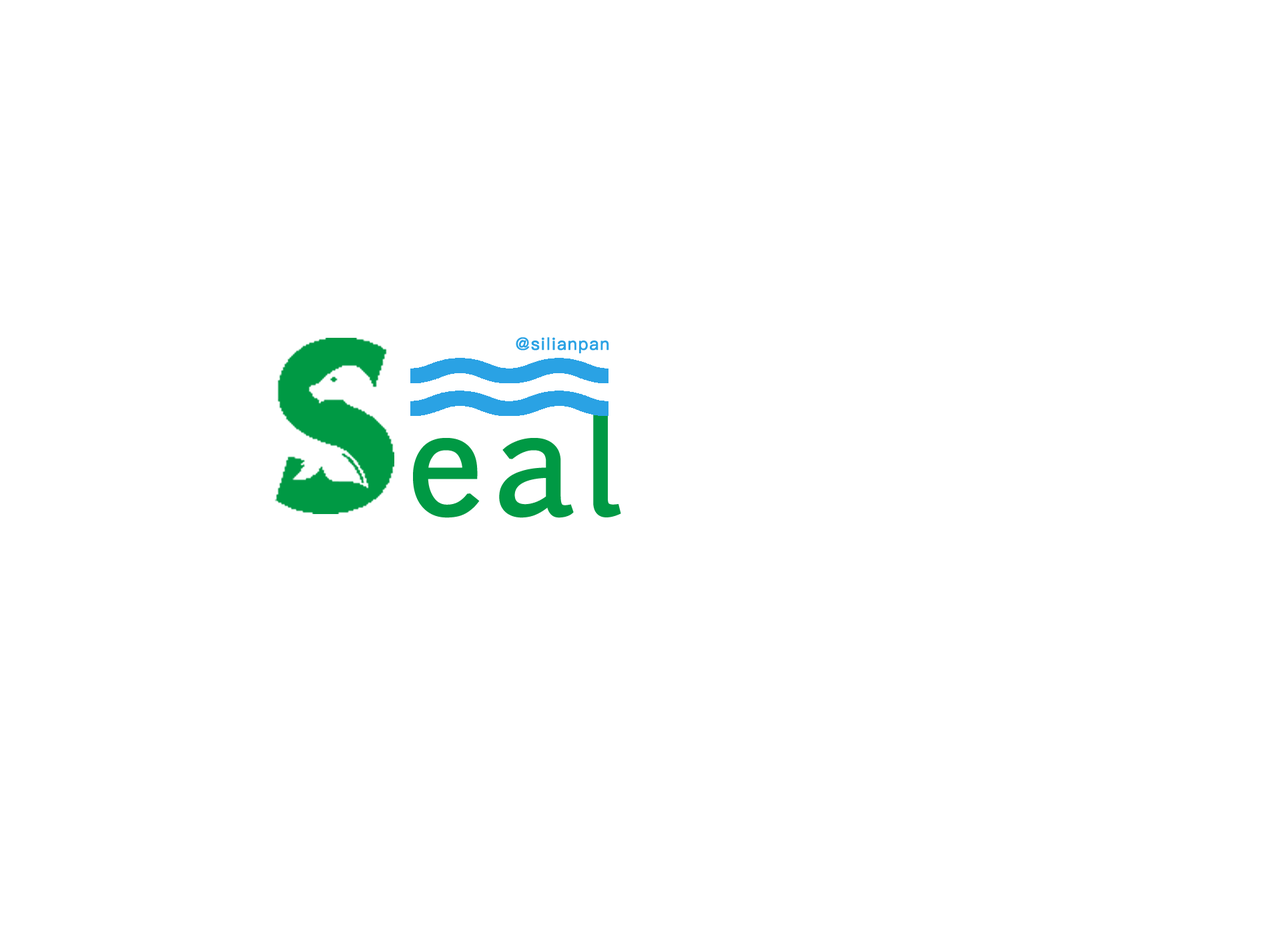
<style>
.page{position:relative;width:1261px;height:946px;background:#ffffff}
.page>*{position:absolute;margin:0}
.t1{font:16.7px "PingFangSC-Regular";letter-spacing:0.05em;color:#2aa2e4;font-weight:bold}
.t2{font:139px "EuphemiaUCAS";letter-spacing:0.05em;color:#009944;font-weight:bold}
</style>
<div class="page">
<p class="t1" style="left:516px;top:337px;width:93px;height:17px">@silianpan</p>
<p class="t2" style="left:413px;top:406px;width:208px;height:112px">eal</p>
</div>
